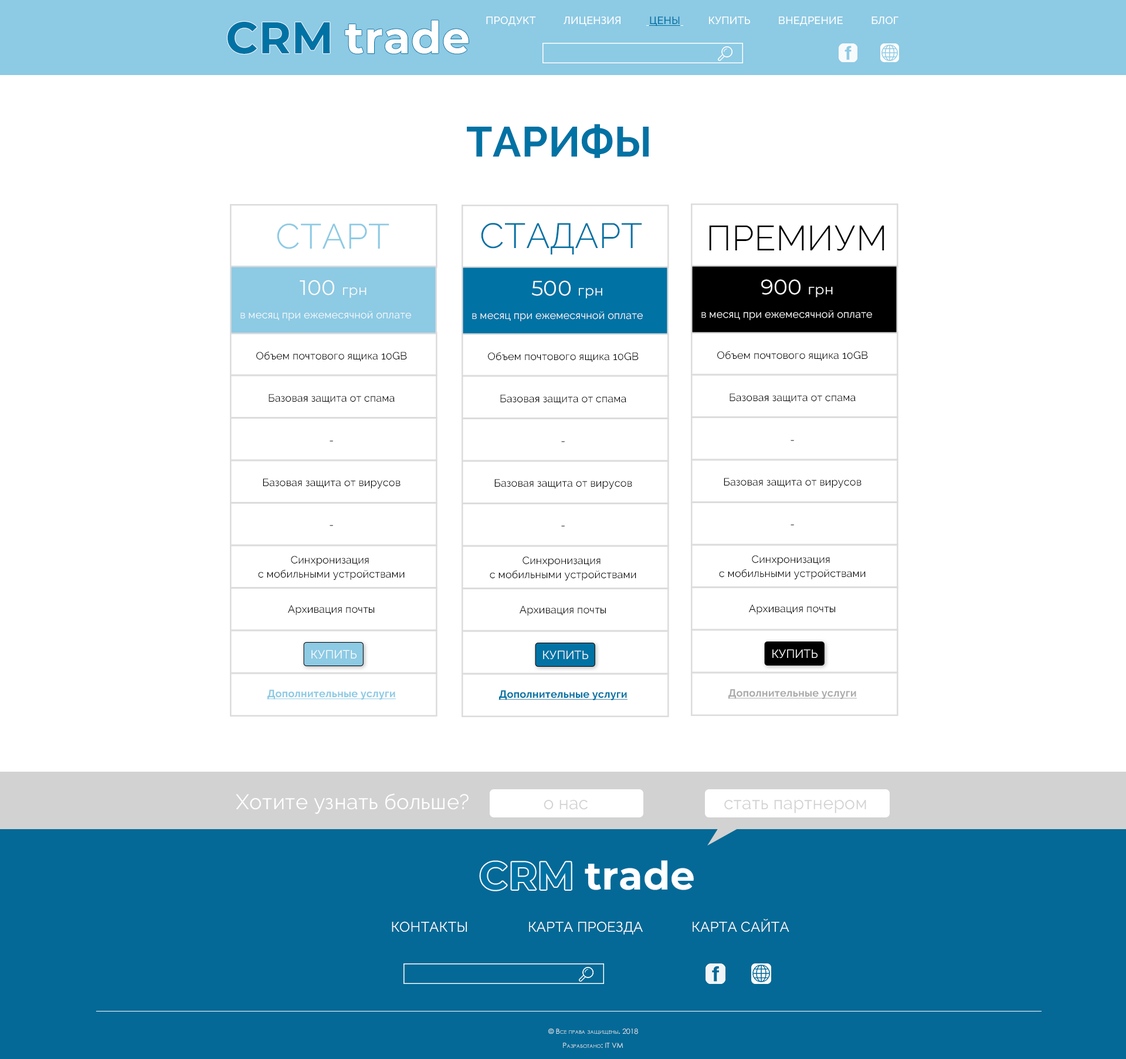
<style>
.page{position:relative;width:1126px;height:1059px;background:#ffffff}
.page>*{position:absolute;margin:0}
.t1{font:10.6px "Raleway-Medium";letter-spacing:0.01em;color:#ffffff;text-transform:uppercase}
.t2{font:10.6px "Raleway-Medium";letter-spacing:0.01em;color:#0072a4;text-transform:uppercase;text-decoration:underline}
.t3{font:44.5px "Montserrat-Bold";letter-spacing:0.01em;color:#0072a4}
.t4{font:44.5px "Montserrat-Bold";letter-spacing:0.01em;color:#fffefe}
.t5{font:42.2px "Raleway-Bold";letter-spacing:0.01em;color:#0072a4;text-transform:uppercase}
.t6{font:35.2px "Raleway-Light";letter-spacing:0.01em;color:#8dcae4;font-variant:small-caps}
.t7{font:35.2px "Raleway-Light";letter-spacing:0.01em;color:#0072a4;font-variant:small-caps}
.t8{font:35.2px "Raleway-Light";letter-spacing:0.01em;color:#000000;font-variant:small-caps}
.t9{font:10.6px/23.5px "Raleway-Regular";letter-spacing:0.01em;color:#fbfbfb;font-variant:small-caps}
.t10{font:14.1px/23.5px "Raleway-Regular";letter-spacing:0.01em;color:#fbfbfb;font-variant:small-caps}
.t11{font:21.1px/23.5px "Montserrat-Regular";letter-spacing:0.01em;color:#fbfbfb;font-variant:small-caps}
.t12{font:14.1px/23.5px "Montserrat-Regular";letter-spacing:0.01em;color:#fbfbfb;font-variant:small-caps}
.t13{font:10.6px/21.1px "Raleway-Regular";letter-spacing:0.01em;color:#010000;font-variant:small-caps}
.t14{font:10.6px/14.1px "Raleway-Regular";letter-spacing:0.01em;color:#010000;font-variant:small-caps}
.t15{font:10.6px/21.1px "Raleway-Bold";letter-spacing:0.01em;color:#8dcae4;font-variant:small-caps;text-decoration:underline}
.t16{font:10.6px/21.1px "Raleway-Bold";letter-spacing:0.01em;color:#0072a4;font-variant:small-caps;text-decoration:underline}
.t17{font:10.6px/21.1px "Raleway-Bold";letter-spacing:0.01em;color:#acabab;font-variant:small-caps;text-decoration:underline}
.t18{font:11.7px "Raleway-Regular";letter-spacing:0.01em;color:#fffefe;font-variant:small-caps}
.t19{font:11.7px "Raleway-Regular";letter-spacing:0.01em;color:#ffffff;font-variant:small-caps}
.t20{font:21.1px "Raleway-Regular";letter-spacing:0.01em;color:#ffffff;font-variant:small-caps}
.t21{font:17.6px "Raleway-Regular";letter-spacing:0.01em;color:#d2d2d2;font-variant:small-caps}
.t22{font:39.2px "Montserrat-Bold";letter-spacing:0.01em;color:#0072a4}
.t23{font:39.2px "Montserrat-Bold";letter-spacing:0.01em;color:#fffefe}
.t24{font:14.1px "Raleway-Regular";letter-spacing:0.01em;color:#ffffff;text-transform:uppercase}
.t25{font:7px/7px "CenturyGothic";letter-spacing:0.01em;color:#ffffff;font-variant:small-caps}
</style>
<div class="page">
<p class="t1" style="left:486px;top:16px;width:412px;height:10px">Продукт          Лицензия          <span class="t2">Цены </span>         Купить          Внедрение          Блог</p>
<p class="t3" style="left:228px;top:22px;width:102px;height:32px">CRM</p>
<p class="t4" style="left:345px;top:20px;width:124px;height:34px">trade</p>
<p class="t5" style="left:467px;top:124px;width:182px;height:34px">тарифы</p>
<p class="t6" style="left:277px;top:223px;width:112px;height:26px">СТАРТ</p>
<p class="t7" style="left:481px;top:223px;width:161px;height:32px">СТАДАРТ</p>
<p class="t8" style="left:709px;top:225px;width:175px;height:26px">ПРЕМИУМ</p>
<p class="t9" style="left:240px;top:280px;width:171px;height:41px"><span class="t10">                </span><span class="t11">100 </span><span class="t12">грн<br></span>в месяц при ежемесячной оплате<br><span class="t10"><br>€3.50 ежегодная оплата</span></p>
<p class="t9" style="left:472px;top:280px;width:171px;height:41px"><span class="t10">                </span><span class="t11">500 </span><span class="t12">грн<br></span>в месяц при ежемесячной оплате<br><span class="t10"><br>€3.50 ежегодная оплата</span></p>
<p class="t9" style="left:701px;top:279px;width:171px;height:41px"><span class="t10">                </span><span class="t11">900 </span><span class="t12">грн<br></span>в месяц при ежемесячной оплате<br><span class="t10"><br>€3.50 ежегодная оплата</span></p>
<p class="t13" style="left:256px;top:351px;width:151px;height:349px;text-align:center">Объем почтового ящика 10GB<br><br>Базовая защита от спама<br><br>-<br><br>Базовая защита от вирусов<br><br>-<br><br><span class="t14">Синхронизация <br>с мобильными устройствами<br><br></span>Архивация почты<br><br><br><br><span class="t15">Дополнительные услуги</span></p>
<p class="t13" style="left:488px;top:352px;width:151px;height:348px;text-align:center">Объем почтового ящика 10GB<br><br>Базовая защита от спама<br><br>-<br><br>Базовая защита от вирусов<br><br>-<br><br><span class="t14">Синхронизация <br>с мобильными устройствами<br><br></span>Архивация почты<br><br><br><br><span class="t16">Дополнительные услуги</span></p>
<p class="t13" style="left:717px;top:351px;width:151px;height:348px;text-align:center">Объем почтового ящика 10GB<br><br>Базовая защита от спама<br><br>-<br><br>Базовая защита от вирусов<br><br>-<br><br><span class="t14">Синхронизация <br>с мобильными устройствами<br><br></span>Архивация почты<br><br><br><br><span class="t17">Дополнительные услуги</span></p>
<p class="t18" style="left:311px;top:650px;width:46px;height:9px">КУПИТЬ</p>
<p class="t19" style="left:543px;top:650px;width:45px;height:10px">КУПИТЬ</p>
<p class="t19" style="left:772px;top:649px;width:45px;height:10px">КУПИТЬ</p>
<p class="t20" style="left:236px;top:793px;width:233px;height:21px">Хотите узнать больше?</p>
<p class="t21" style="left:544px;top:800px;width:44px;height:10px">о нас</p>
<p class="t21" style="left:724px;top:800px;width:142px;height:13px">стать партнером</p>
<p class="t22" style="left:480px;top:861px;width:91px;height:29px">CRM</p>
<p class="t23" style="left:585px;top:860px;width:109px;height:30px">trade</p>
<p class="t24" style="left:392px;top:919px;width:397px;height:16px">контакты                Карта проезда             Карта сайта</p>
<p class="t25" style="left:548px;top:1029px;width:90px;height:19px">© Все права защищены. 2018<br><br>       Разработано: IT VM</p>
</div>
